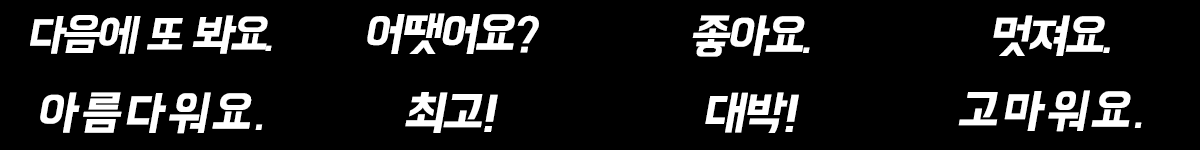
<style>
.page{position:relative;width:1200px;height:150px;background:#000000}
.page>*{position:absolute;margin:0}
.t1{font:45px "BMHANNA11yrsold";letter-spacing:-0.08em;color:#ffffff;font-style:italic}
.t2{font:48px "BMHANNA11yrsold";letter-spacing:-0.06em;color:#ffffff;font-style:italic}
.t3{font:48px "BMHANNA11yrsold";letter-spacing:0.06em;color:#ffffff;font-style:italic}
</style>
<div class="page">
<p class="t1" style="left:30px;top:15px;width:242px;height:39px">다음에 또 봐요.</p>
<p class="t2" style="left:367px;top:13px;width:172px;height:41px">어땟어요?</p>
<p class="t2" style="left:692px;top:15px;width:118px;height:42px">좋아요.</p>
<p class="t2" style="left:993px;top:15px;width:117px;height:41px">멋져요.</p>
<p class="t3" style="left:40px;top:92px;width:223px;height:42px">아름다워요.</p>
<p class="t2" style="left:405px;top:92px;width:93px;height:41px">최고!</p>
<p class="t2" style="left:705px;top:92px;width:94px;height:41px">대박!</p>
<p class="t3" style="left:958px;top:90px;width:184px;height:42px">고마워요.</p>
</div>
